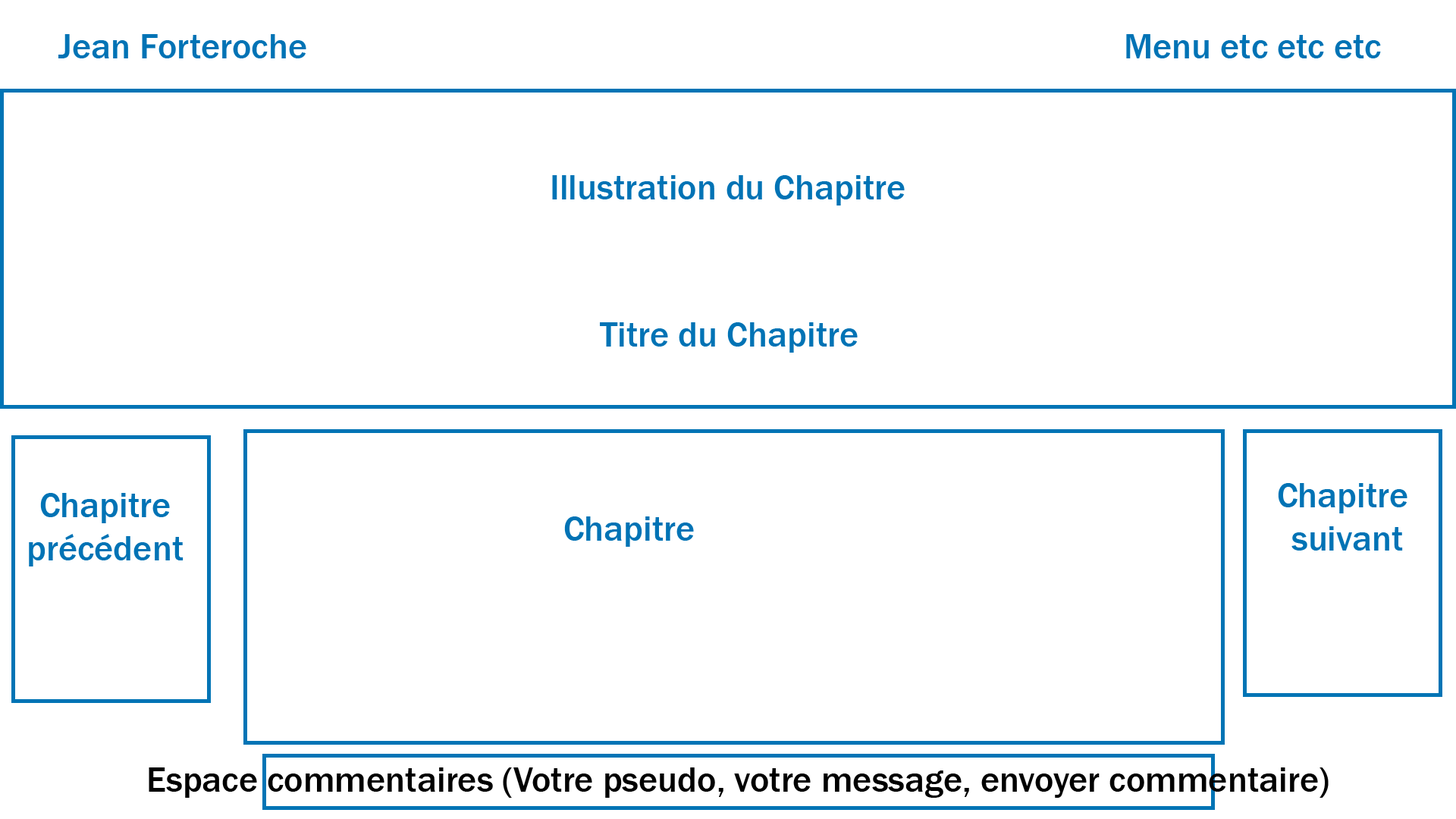
<style>
.page{position:relative;width:1456px;height:819px;background:#ffffff}
.page>*{position:absolute;margin:0}
.t1{font:36.4px "FranklinGothic-Medium";color:#0073b5}
.t2{font:36.4px "FranklinGothic-Medium";color:#000000}
</style>
<div class="page">
<p class="t1" style="left:58px;top:34px;width:248px;height:24px">Jean Forteroche</p>
<p class="t1" style="left:1126px;top:34px;width:255px;height:24px">Menu etc etc etc</p>
<p class="t1" style="left:552px;top:175px;width:353px;height:31px">Illustration du Chapitre</p>
<p class="t1" style="left:600px;top:322px;width:258px;height:31px">Titre du Chapitre</p>
<p class="t1" style="left:1278px;top:483px;width:129px;height:68px;text-align:center">Chapitre <br>suivant</p>
<p class="t1" style="left:29px;top:493px;width:155px;height:73px;text-align:center">Chapitre<br>précédent</p>
<p class="t1" style="left:564px;top:516px;width:130px;height:31px">Chapitre</p>
<p class="t2" style="left:149px;top:767px;width:1180px;height:31px">Espace commentaires (Votre pseudo, votre message, envoyer commentaire)</p>
</div>
